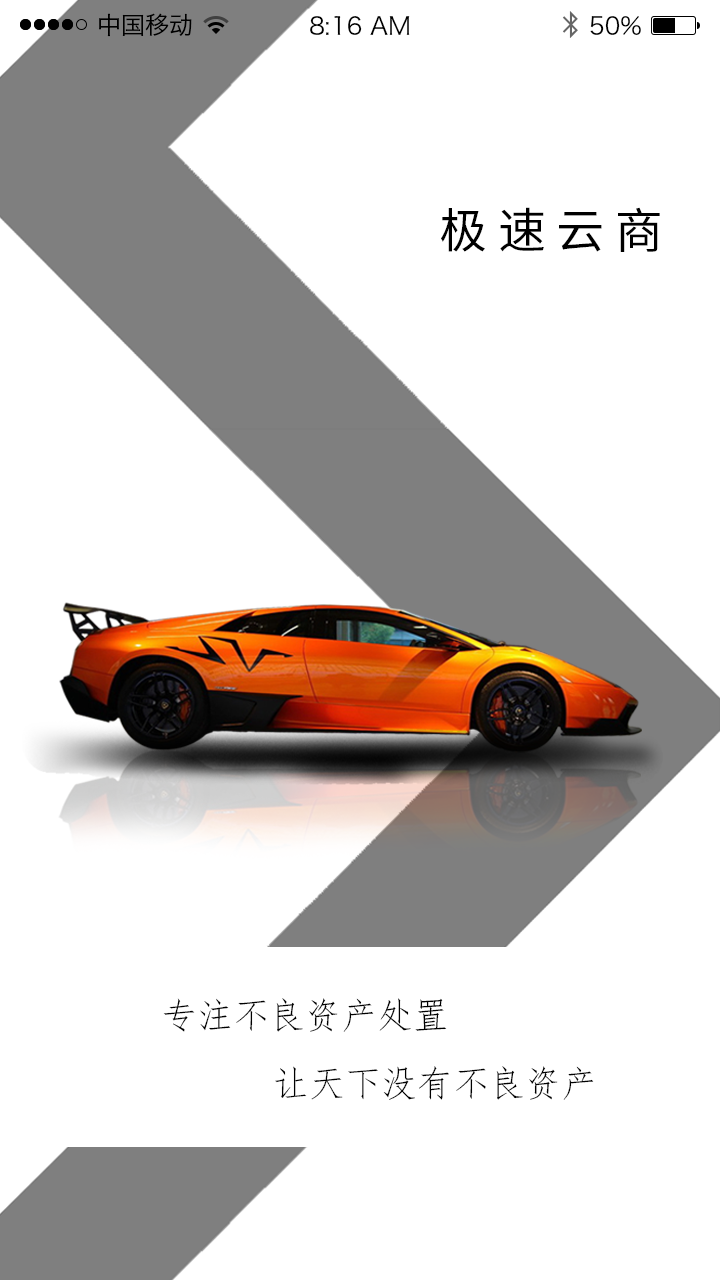
<style>
.page{position:relative;width:720px;height:1280px;background:#ffffff}
.page>*{position:absolute;margin:0}
.t1{font:24px "HiraginoSansGB-W3";color:#000000}
.t2{font:48px "NotoSansHans-Regular";color:#000000}
.t3{font:36px "FangSong";color:#000000}
</style>
<div class="page">
<p class="t1" style="left:99px;top:13px;width:93px;height:24px">中国移动</p>
<p class="t1" style="left:310px;top:16px;width:100px;height:19px">8:16 AM</p>
<p class="t1" style="left:590px;top:16px;width:51px;height:19px">50%</p>
<p class="t2" style="left:441px;top:207px;width:219px;height:45px">极 速 云 商</p>
<p class="t3" style="left:163px;top:998px;width:284px;height:34px">专注不良资产处置</p>
<p class="t3" style="left:275px;top:1066px;width:319px;height:34px">让天下没有不良资产</p>
</div>
